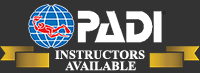
<style>
.page{position:relative;width:200px;height:73px;background:#333333}
.page>*{position:absolute;margin:0}
.t1{font:12.5px "TimesNewRomanPS-BoldMT";color:#ffffff}
</style>
<div class="page">
<p class="t1" style="left:55px;top:50px;width:90px;height:9px">INSTRUCTORS</p>
<p class="t1" style="left:65px;top:61px;width:71px;height:10px">AVAILABLE</p>
</div>
